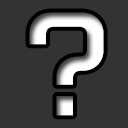
<style>
.page{position:relative;width:128px;height:128px;background:#333333}
.page>*{position:absolute;margin:0}
.t1{font:146.2px "BFHud-SemiBold"}
</style>
<div class="page">
<p class="t1" style="left:29px;top:12px;width:75px;height:104px">?</p>
</div>
